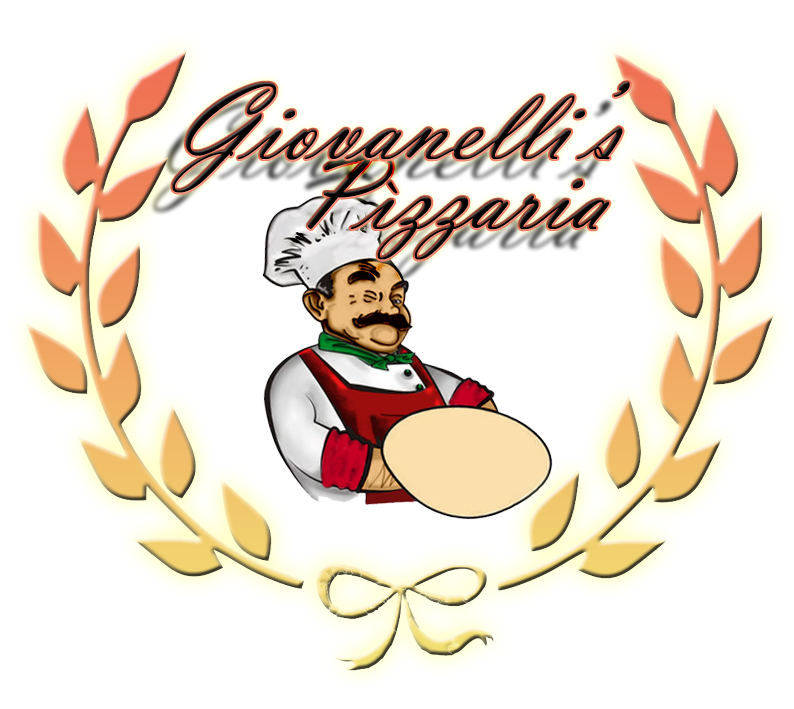
<style>
.page{position:relative;width:794px;height:709px;background:#ffffff}
.page>*{position:absolute;margin:0}
.t1{font:110px "VladimirScript";color:#000000}
</style>
<div class="page">
<p class="t1" style="left:172px;top:82px;width:458px;height:111px">Giovanelli’s</p>
<p class="t1" style="left:307px;top:153px;width:303px;height:107px">Pìzzaria</p>
</div>
